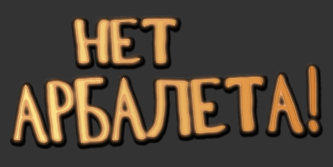
<style>
.page{position:relative;width:333px;height:167px;background:#333333}
.page>*{position:absolute;margin:0}
.t1{font:62.5px "ILKComic";color:#e7b366;text-transform:uppercase}
.t2{font:83.2px "ILKComic";text-transform:uppercase;scale:0.83 1}
</style>
<div class="page">
<p class="t1" style="left:75px;top:19px;width:101px;height:44px">нет</p>
<p class="t2" style="left:13px;top:66px;width:305px;height:77px;rotate:-2deg">арбалета!</p>
</div>
